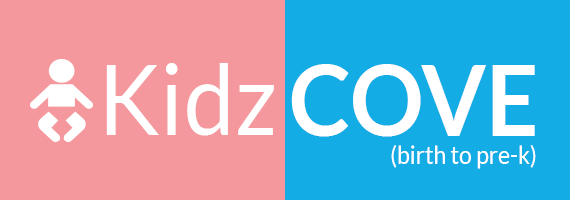
<style>
.page{position:relative;width:570px;height:200px;background:#f5989d}
.page>*{position:absolute;margin:0}
.t1{font:98.3px "Lato-Regular";color:#ffffff;scale:0.93 1}
.t2{font:98.4px "Lato-Bold";color:#ffffff;text-transform:uppercase;scale:0.93 1}
.t3{font:24.6px "Lato-Regular";color:#ffffff;scale:0.93 1}
</style>
<div class="page">
<p class="t1" style="left:106px;top:63px;width:168px;height:73px">Kidz</p>
<p class="t2" style="left:291px;top:64px;width:244px;height:73px">Cove</p>
<p class="t3" style="left:391px;top:145px;width:145px;height:24px">(birth to pre-k)</p>
</div>
